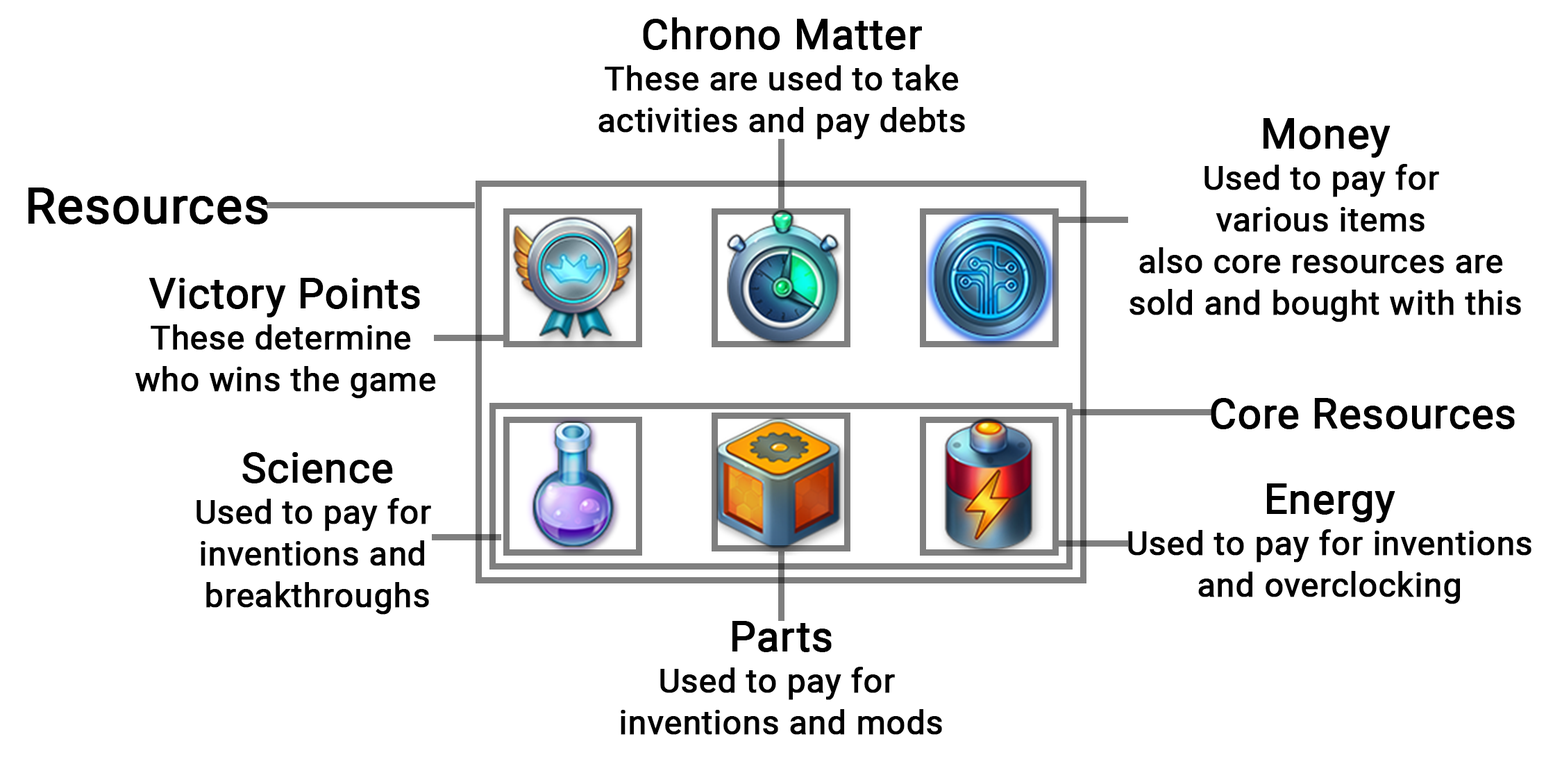
<style>
.page{position:relative;width:1562px;height:764px;background:#ffffff}
.page>*{position:absolute;margin:0}
.t1{font:33.3px/41.6px "Roboto-Regular";color:#000000;font-weight:bold}
.t2{font:41.6px/41.6px "Roboto-Regular";color:#000000;font-weight:bold}
.t3{font:50px "Roboto-Regular";color:#000000;font-weight:bold}
.t4{font:41.6px "Roboto-Regular";color:#000000;font-weight:bold}
</style>
<div class="page">
<p class="t1" style="left:598px;top:17px;width:367px;height:123px;text-align:center"><span class="t2">Chrono Matter<br></span>These are used to take<br>activities and pay debts</p>
<p class="t1" style="left:1129px;top:118px;width:392px;height:204px;text-align:center"><span class="t2">Money<br></span>Used to pay for <br>various items <br>also core resources are <br>sold and bought with this</p>
<p class="t3" style="left:28px;top:187px;width:240px;height:37px">Resources</p>
<p class="t1" style="left:135px;top:278px;width:301px;height:120px;text-align:center"><span class="t2">Victory Points<br></span>These determine <br>who wins the game</p>
<p class="t4" style="left:1211px;top:398px;width:304px;height:31px">Core Resources</p>
<p class="t1" style="left:196px;top:452px;width:235px;height:162px;text-align:center"><span class="t2">Science<br></span>Used to pay for <br>inventions and <br>breakthroughs</p>
<p class="t1" style="left:1128px;top:483px;width:403px;height:121px;text-align:center"><span class="t2">Energy<br></span>Used to pay for inventions<br>and overclocking</p>
<p class="t1" style="left:621px;top:621px;width:321px;height:113px;text-align:center"><span class="t2">Parts<br></span>Used to pay for <br>inventions and mods</p>
</div>
